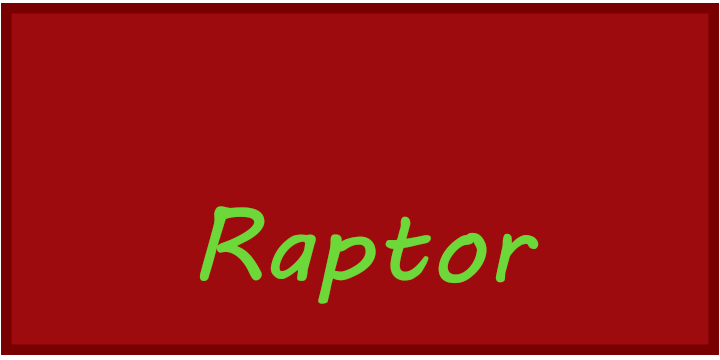
<style>
.page{position:relative;width:720px;height:360px;background:#9e0b0f}
.page>*{position:absolute;margin:0}
.t1{font:100px "MVBoli";color:#6dd839;scale:1.06 1}
</style>
<div class="page">
<p class="t1" style="left:199px;top:206px;width:340px;height:98px">Raptor</p>
</div>
